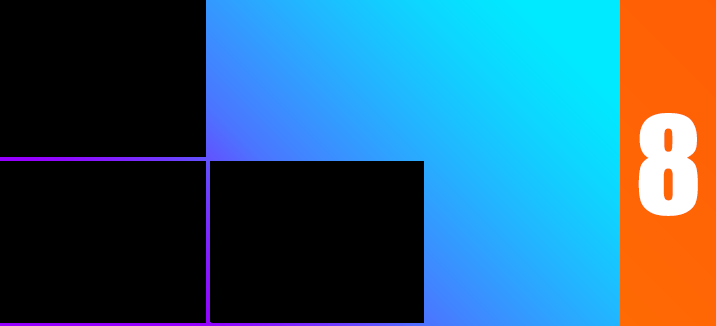
<style>
.page{position:relative;width:716px;height:326px;background:#000000}
.page>*{position:absolute;margin:0}
.t1{font:125px "Impact";color:#ffffff}
</style>
<div class="page">
<p class="t1" style="left:638px;top:113px;width:60px;height:103px">8</p>
</div>
